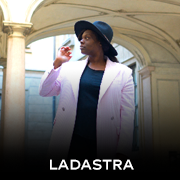
<style>
.page{position:relative;width:180px;height:180px}
.page>*{position:absolute;margin:0}
.t1{font:14px "TypoldExtended-Medium";color:#ffffff}
</style>
<div class="page">
<p class="t1" style="left:50px;top:159px;width:84px;height:11px">LADASTRA</p>
</div>
